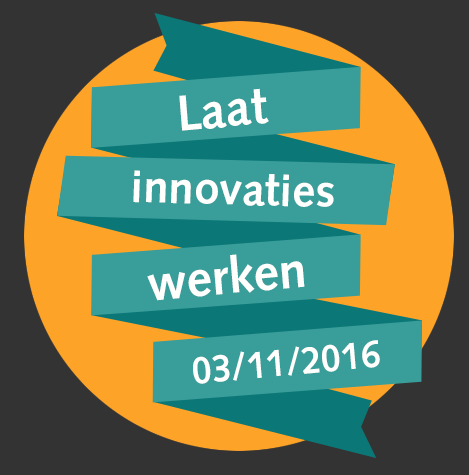
<style>
.page{position:relative;width:469px;height:475px;background:#333333}
.page>*{position:absolute;margin:0}
.t1{font:50.4px "SyntaxLTStd-Bold";color:#fffffe}
.t2{font:45.6px "SyntaxLTStd-Bold";color:#fffffe}
.t3{font:50.3px "SyntaxLTStd-Bold";color:#fffffe}
.t4{font:38.2px "SyntaxLTStd-Bold";color:#fffffe;scale:0.93 1}
</style>
<div class="page">
<p class="t1" style="left:179px;top:88px;width:90px;height:43px;rotate:-5deg">Laat</p>
<p class="t2" style="left:133px;top:170px;width:201px;height:37px;rotate:1deg">innovaties</p>
<p class="t3" style="left:147px;top:254px;width:158px;height:47px;rotate:-5deg">werken</p>
<p class="t4" style="left:193px;top:340px;width:187px;height:44px;rotate:-5deg">03/11/2016</p>
</div>
